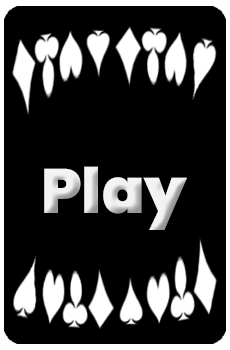
<style>
.page{position:relative;width:230px;height:350px;background:#000000}
.page>*{position:absolute;margin:0}
.t1{font:62.7px "Poppins-Black";color:#f1f1f1}
</style>
<div class="page">
<p class="t1" style="left:44px;top:166px;width:143px;height:64px">Play</p>
</div>
